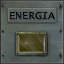
<style>
.page{position:relative;width:64px;height:64px}
.page>*{position:absolute;margin:0}
.t1{font:11px "LucidaConsole";letter-spacing:-0.04em;font-weight:bold}
</style>
<div class="page">
<p class="t1" style="left:10px;top:12px;width:45px;height:8px">ENERGIA</p>
</div>
